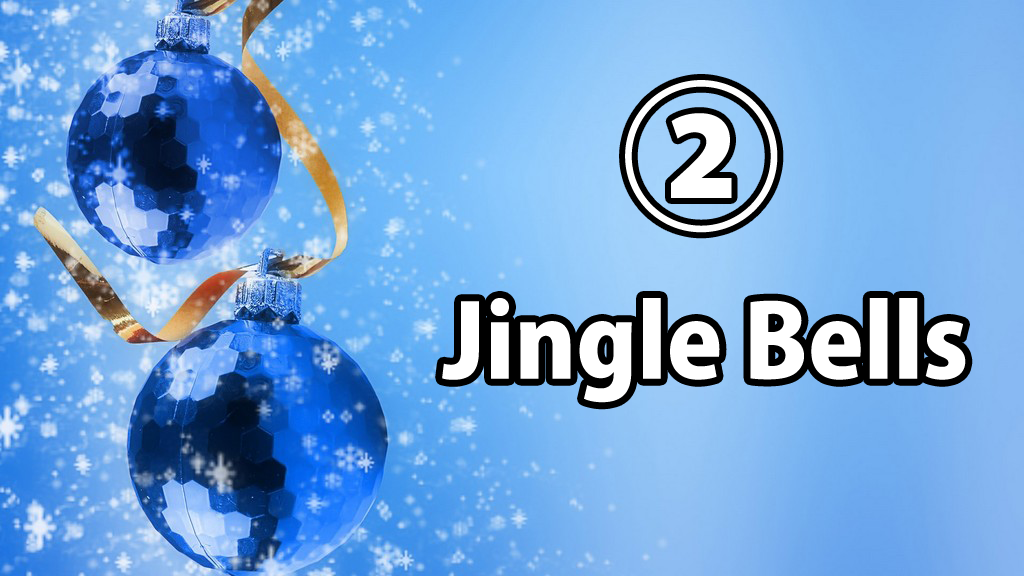
<style>
.page{position:relative;width:1024px;height:576px}
.page>*{position:absolute;margin:0}
.t1{font:160px "KozGoPr6N-Heavy";color:#ffffff}
.t2{font:100px "KozGoPr6N-Heavy";color:#ffffff}
</style>
<div class="page">
<p class="t1" style="left:625px;top:80px;width:153px;height:153px">②</p>
<p class="t2" style="left:442px;top:298px;width:524px;height:105px">Jingle Bells</p>
</div>
